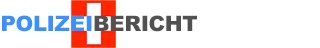
<style>
.page{position:relative;width:320px;height:48px;background:#ffffff}
.page>*{position:absolute;margin:0}
.t1{font:21.2px "Arial-Black";color:#3891ff}
.t2{font:21.2px "Arial-Black";color:#515151}
</style>
<div class="page">
<p class="t1" style="left:2px;top:15px;width:195px;height:17px">POLIZEI<span class="t2">BERICHT</span></p>
</div>
